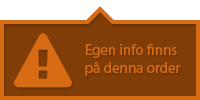
<style>
.page{position:relative;width:200px;height:100px;background:#813d07}
.page>*{position:absolute;margin:0}
.t1{font:15px/18px "MyriadPro-Regular";color:#d76c15}
</style>
<div class="page">
<p class="t1" style="left:85px;top:44px;width:96px;height:32px">Egen info finns<br>på denna order</p>
</div>
